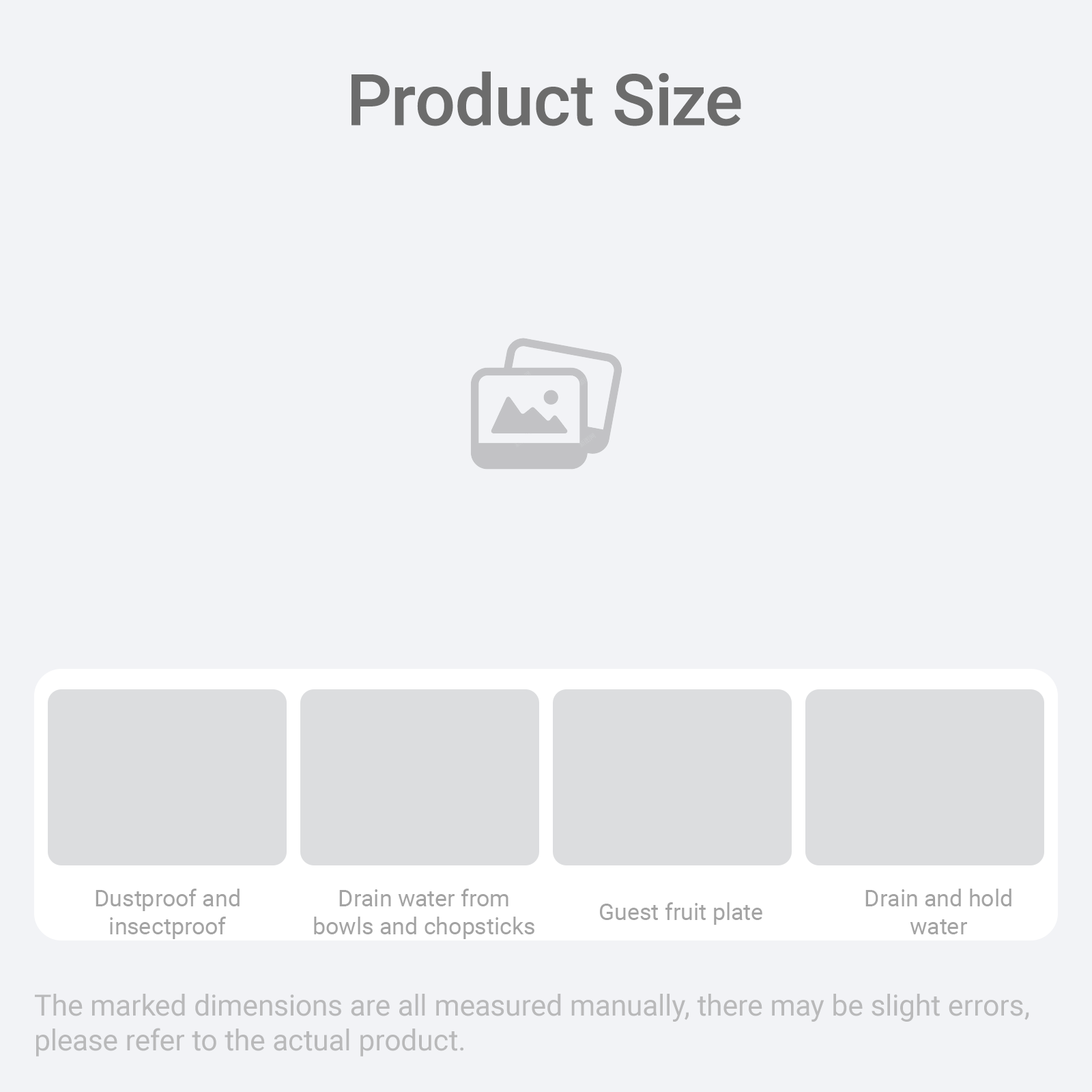
<style>
.page{position:relative;width:1092px;height:1092px;background:#f2f3f6}
.page>*{position:absolute;margin:0}
.t1{font:71.3px "Roboto-Medium";color:#6c6c6c}
.t2{font:23.3px "Roboto-Regular";color:#a3a3a3}
.t3{font:29.1px "Roboto-Regular";color:#a3a3a3}
</style>
<div class="page">
<p class="t1" style="left:351px;top:71px;width:390px;height:55px">Product Size</p>
<p class="t2" style="left:96px;top:889px;width:144px;height:50px;text-align:center">Dustproof and<br>insectproof</p>
<p class="t2" style="left:314px;top:889px;width:220px;height:50px;text-align:center">Drain water from<br>bowls and chopsticks</p>
<p class="t2" style="left:865px;top:889px;width:146px;height:45px;text-align:center">Drain and hold<br>water</p>
<p class="t2" style="left:600px;top:902px;width:162px;height:23px">Guest fruit plate</p>
<p class="t3" style="left:35px;top:994px;width:994px;height:62px;opacity:0.75">The marked dimensions are all measured manually, there may be slight errors, please refer to the actual product.</p>
</div>
